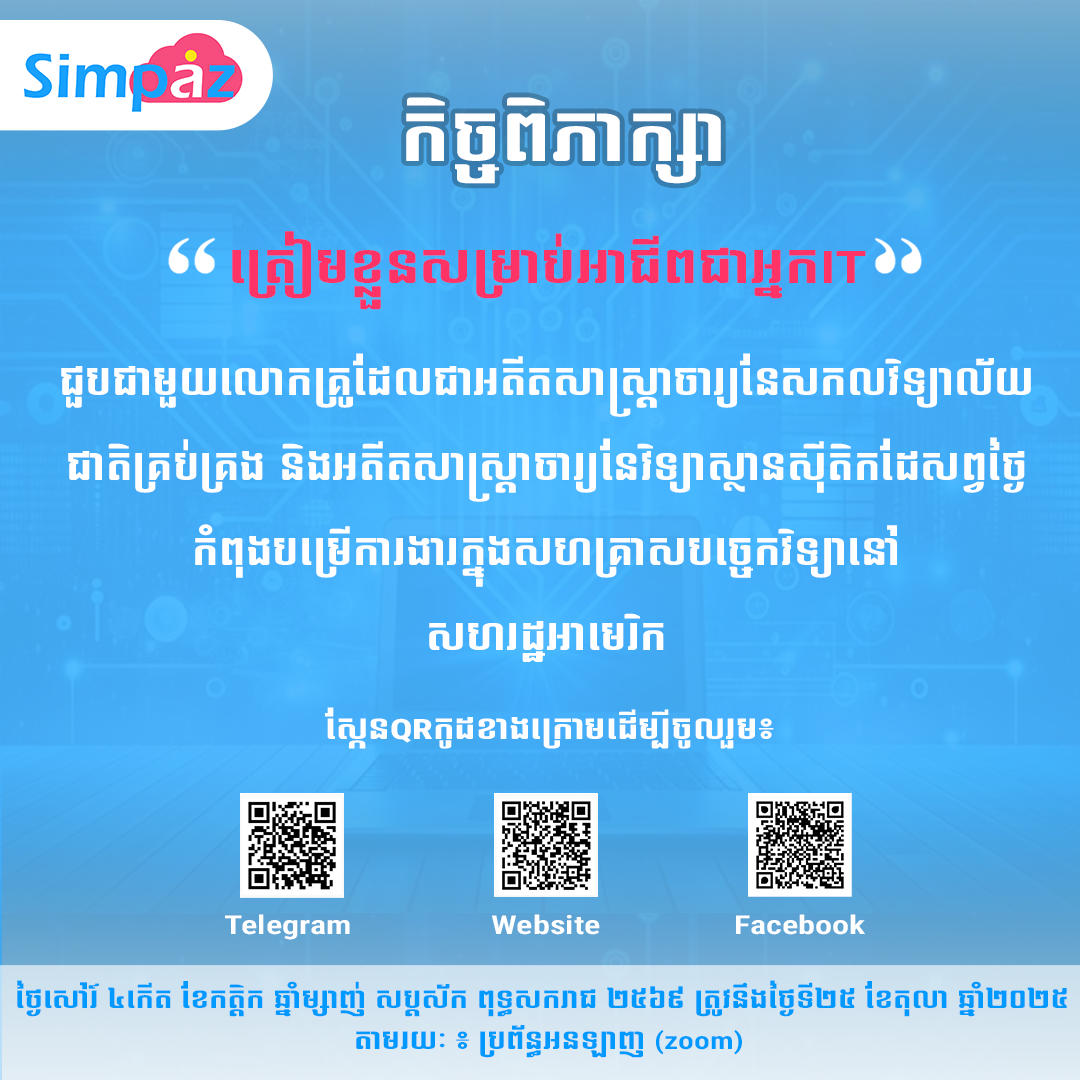
<style>
.page{position:relative;width:1080px;height:1080px}
.page>*{position:absolute;margin:0}
.t1{font:65px "NiDA-Bayon";color:#ffffff;scale:1.32 1}
.t2{font:45px/82px "NiDA-Bayon";color:#ff3366;scale:1.32 1}
.t3{font:45px/82px "Roboto-CondensedSemiBold";color:#ff3366;scale:1.32 1}
.t4{font:37px/85px "NiDA-Bayon";color:#ffffff;scale:1.23 1}
.t5{font:28px "NiDA-Bayon";color:#ffffff;scale:1.32 1}
.t6{font:28px "Roboto-CondensedExtraBold";color:#ffffff;scale:1.32 1}
.t7{font:26px "Roboto-CondensedSemiBold";color:#ffffff;scale:1.32 1}
.t8{font:24px "NiDA-Bayon";color:#0099ff;scale:1.32 1}
.t9{font:24px "Roboto-CondensedSemiBold";color:#0099ff;scale:1.32 1}
</style>
<div class="page">
<p class="t1" style="left:406px;top:97px;width:315px;height:87px">កិច្ចពិភាក្សា</p>
<p class="t2" style="left:232px;top:231px;width:634px;height:79px;text-align:center">ត្រៀមខ្លួនសម្រាប់អាជីពជាអ្នក<span class="t3">IT</span></p>
<p class="t4" style="left:61px;top:353px;width:970px;height:309px;text-align:center">ជួបជាមួយលោកគ្រូដែលជាអតីតសាស្ត្រាចារ្យនែសកលវិទ្យាល័យ​​<br>ជាតិគ្រប់គ្រង និងអតីតសាស្ត្រាចារ្យនែវិទ្យាស្ថានស៊ីតិកដែសព្វថ្ងៃ<br>កំពុងបម្រើការងារក្នុងសហគ្រាសបច្ចេកវិទ្យានៅ<br>សហរដ្ឋអាមេរិក</p>
<p class="t5" style="left:325px;top:707px;width:449px;height:42px">ស្កែន<span class="t6">QR</span>កូដខាងក្រោមដើម្បីចូលរួម៖</p>
<p class="t7" style="left:225px;top:914px;width:125px;height:26px">Telegram</p>
<p class="t7" style="left:492px;top:914px;width:108px;height:21px">Website</p>
<p class="t7" style="left:736px;top:914px;width:129px;height:21px">Facebook</p>
<p class="t8" style="left:17px;top:980px;width:1050px;height:37px">ថ្ងៃសៅរ៍ ៤កើត ខែកត្តិក ឆ្នាំម្សាញ់ សប្តស័ក ពុទ្ធសករាជ ២៥៦៩ ត្រូវនឹងថ្ងៃទី២៥ ខែតុលា ឆ្នាំ២០២៥</p>
<p class="t8" style="left:356px;top:1025px;width:386px;height:33px">តាមរយៈ ៖ ប្រព័ន្ធអនឡាញ <span class="t9">(zoom)</span></p>
</div>
